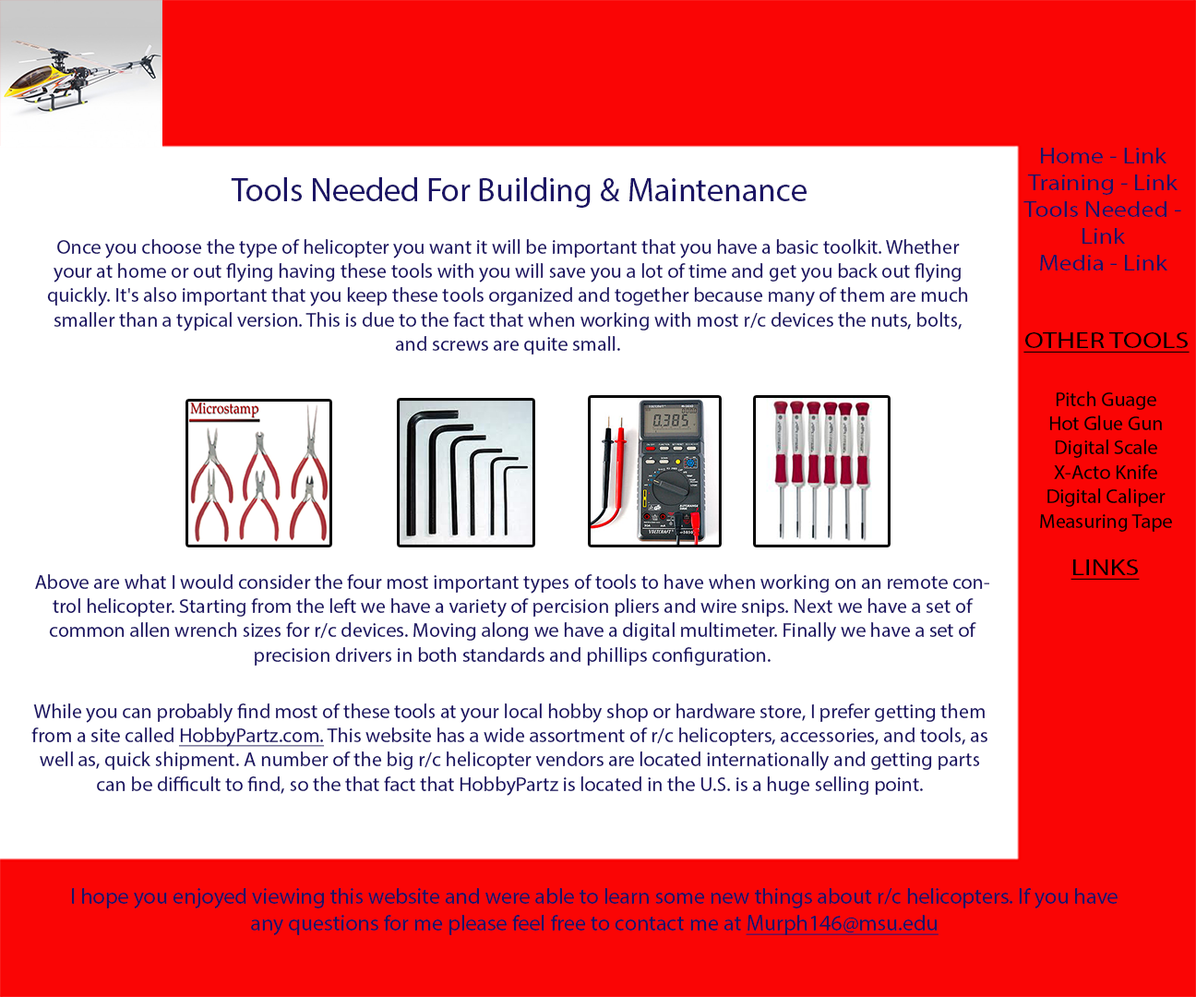
<style>
.page{position:relative;width:1196px;height:997px;background:#ffffff}
.page>*{position:absolute;margin:0}
.t1{font:22.2px "MyriadPro-Regular";color:#1b1464;scale:1.15 1}
.t2{font:33.2px "MyriadPro-Regular";color:#1b1464}
.t3{font:33.2px "MyriadPro-Regular";color:#1b1464;text-transform:uppercase}
.t4{font:20.3px "MyriadPro-Regular";color:#1b1464}
.t5{font:22.2px "MyriadPro-Regular";color:#000000;text-transform:uppercase;text-decoration:underline;scale:1.28 1}
.t6{font:20.3px "MyriadPro-Regular";color:#000000}
.t7{font:20.3px "MyriadPro-Regular";color:#1b1464;text-transform:uppercase}
.t8{font:20.3px "MyriadPro-Regular";color:#1b1464;text-decoration:underline}
.t9{font:22.2px "MyriadPro-Regular";color:#1b1464}
.t10{font:22.2px "MyriadPro-Regular";color:#1b1464;text-decoration:underline}
</style>
<div class="page">
<p class="t1" style="left:1024px;top:148px;width:157px;height:122px;text-align:center">Home - Link<br>Training - Link<br>Tools Needed - Link<br>Media - Link</p>
<p class="t2" style="left:231px;top:177px;width:576px;height:31px"><span class="t3">T</span>ools Needed For Building &amp; Maintenance</p>
<p class="t4" style="left:47px;top:239px;width:921px;height:115px;text-align:center">Once you choose the type of helicopter you want it will be important that you have a basic toolkit. Whether your at home or out flying having these tools with you will save you a lot of time and get you back out flying quickly. It's also important that you keep these tools organized and together because many of them are much smaller than a typical version. This is due to the fact that when working with most r/c devices the nuts, bolts, and screws are quite small.</p>
<p class="t5" style="left:1024px;top:332px;width:166px;height:21px">Other Tools</p>
<p class="t6" style="left:1040px;top:391px;width:132px;height:141px;text-align:center">Pitch Guage<br>Hot Glue Gun<br>Digital Scale<br>X-Acto Knife<br>Digital Caliper<br>Measuring Tape</p>
<p class="t5" style="left:1071px;top:559px;width:69px;height:21px">Links</p>
<p class="t4" style="left:35px;top:574px;width:954px;height:91px;text-align:center"><span class="t7">A</span>bove are what I would consider the four most important types of tools to have when working on an remote control helicopter. Starting from the left we have a variety of percision pliers and wire snips. Next we have a set of common allen wrench sizes for r/c devices. Moving along we have a digital multimeter. Finally we have a set of precision drivers in both standards and phillips configuration.</p>
<p class="t4" style="left:31px;top:703px;width:957px;height:93px;text-align:center">While you can probably find most of these tools at your local hobby shop or hardware store, I prefer getting them from a site called <span class="t8">HobbyPartz.com.</span> This website has a wide assortment of r/c helicopters, accessories, and tools, as well as, quick shipment. A number of the big r/c helicopter vendors are located internationally and getting parts can be difficult to find, so the that fact that HobbyPartz is located in the U.S. is a huge selling point.</p>
<p class="t9" style="left:72px;top:888px;width:1046px;height:47px;text-align:center">I hope you enjoyed viewing this website and were able to learn some new things about r/c helicopters. If you have any questions for me please feel free to contact me at <span class="t10">Murph146@msu.edu</span></p>
</div>
